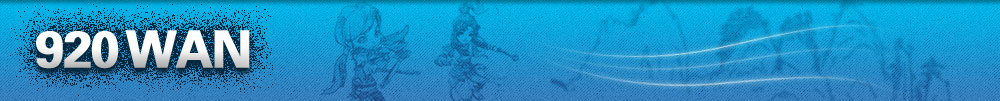
<style>
.page{position:relative;width:1000px;height:101px}
.page>*{position:absolute;margin:0}
.t1{font:51px "FZZYJW--GB1-0";letter-spacing:-0.04em;color:#ffffff;font-weight:bold}
.t2{font:51px "FZZYJW--GB1-0";letter-spacing:0.1em;color:#ffffff;font-weight:bold}
</style>
<div class="page">
<p class="t1" style="left:36px;top:30px;width:214px;height:39px">92<span class="t2">0</span>WAN</p>
</div>
